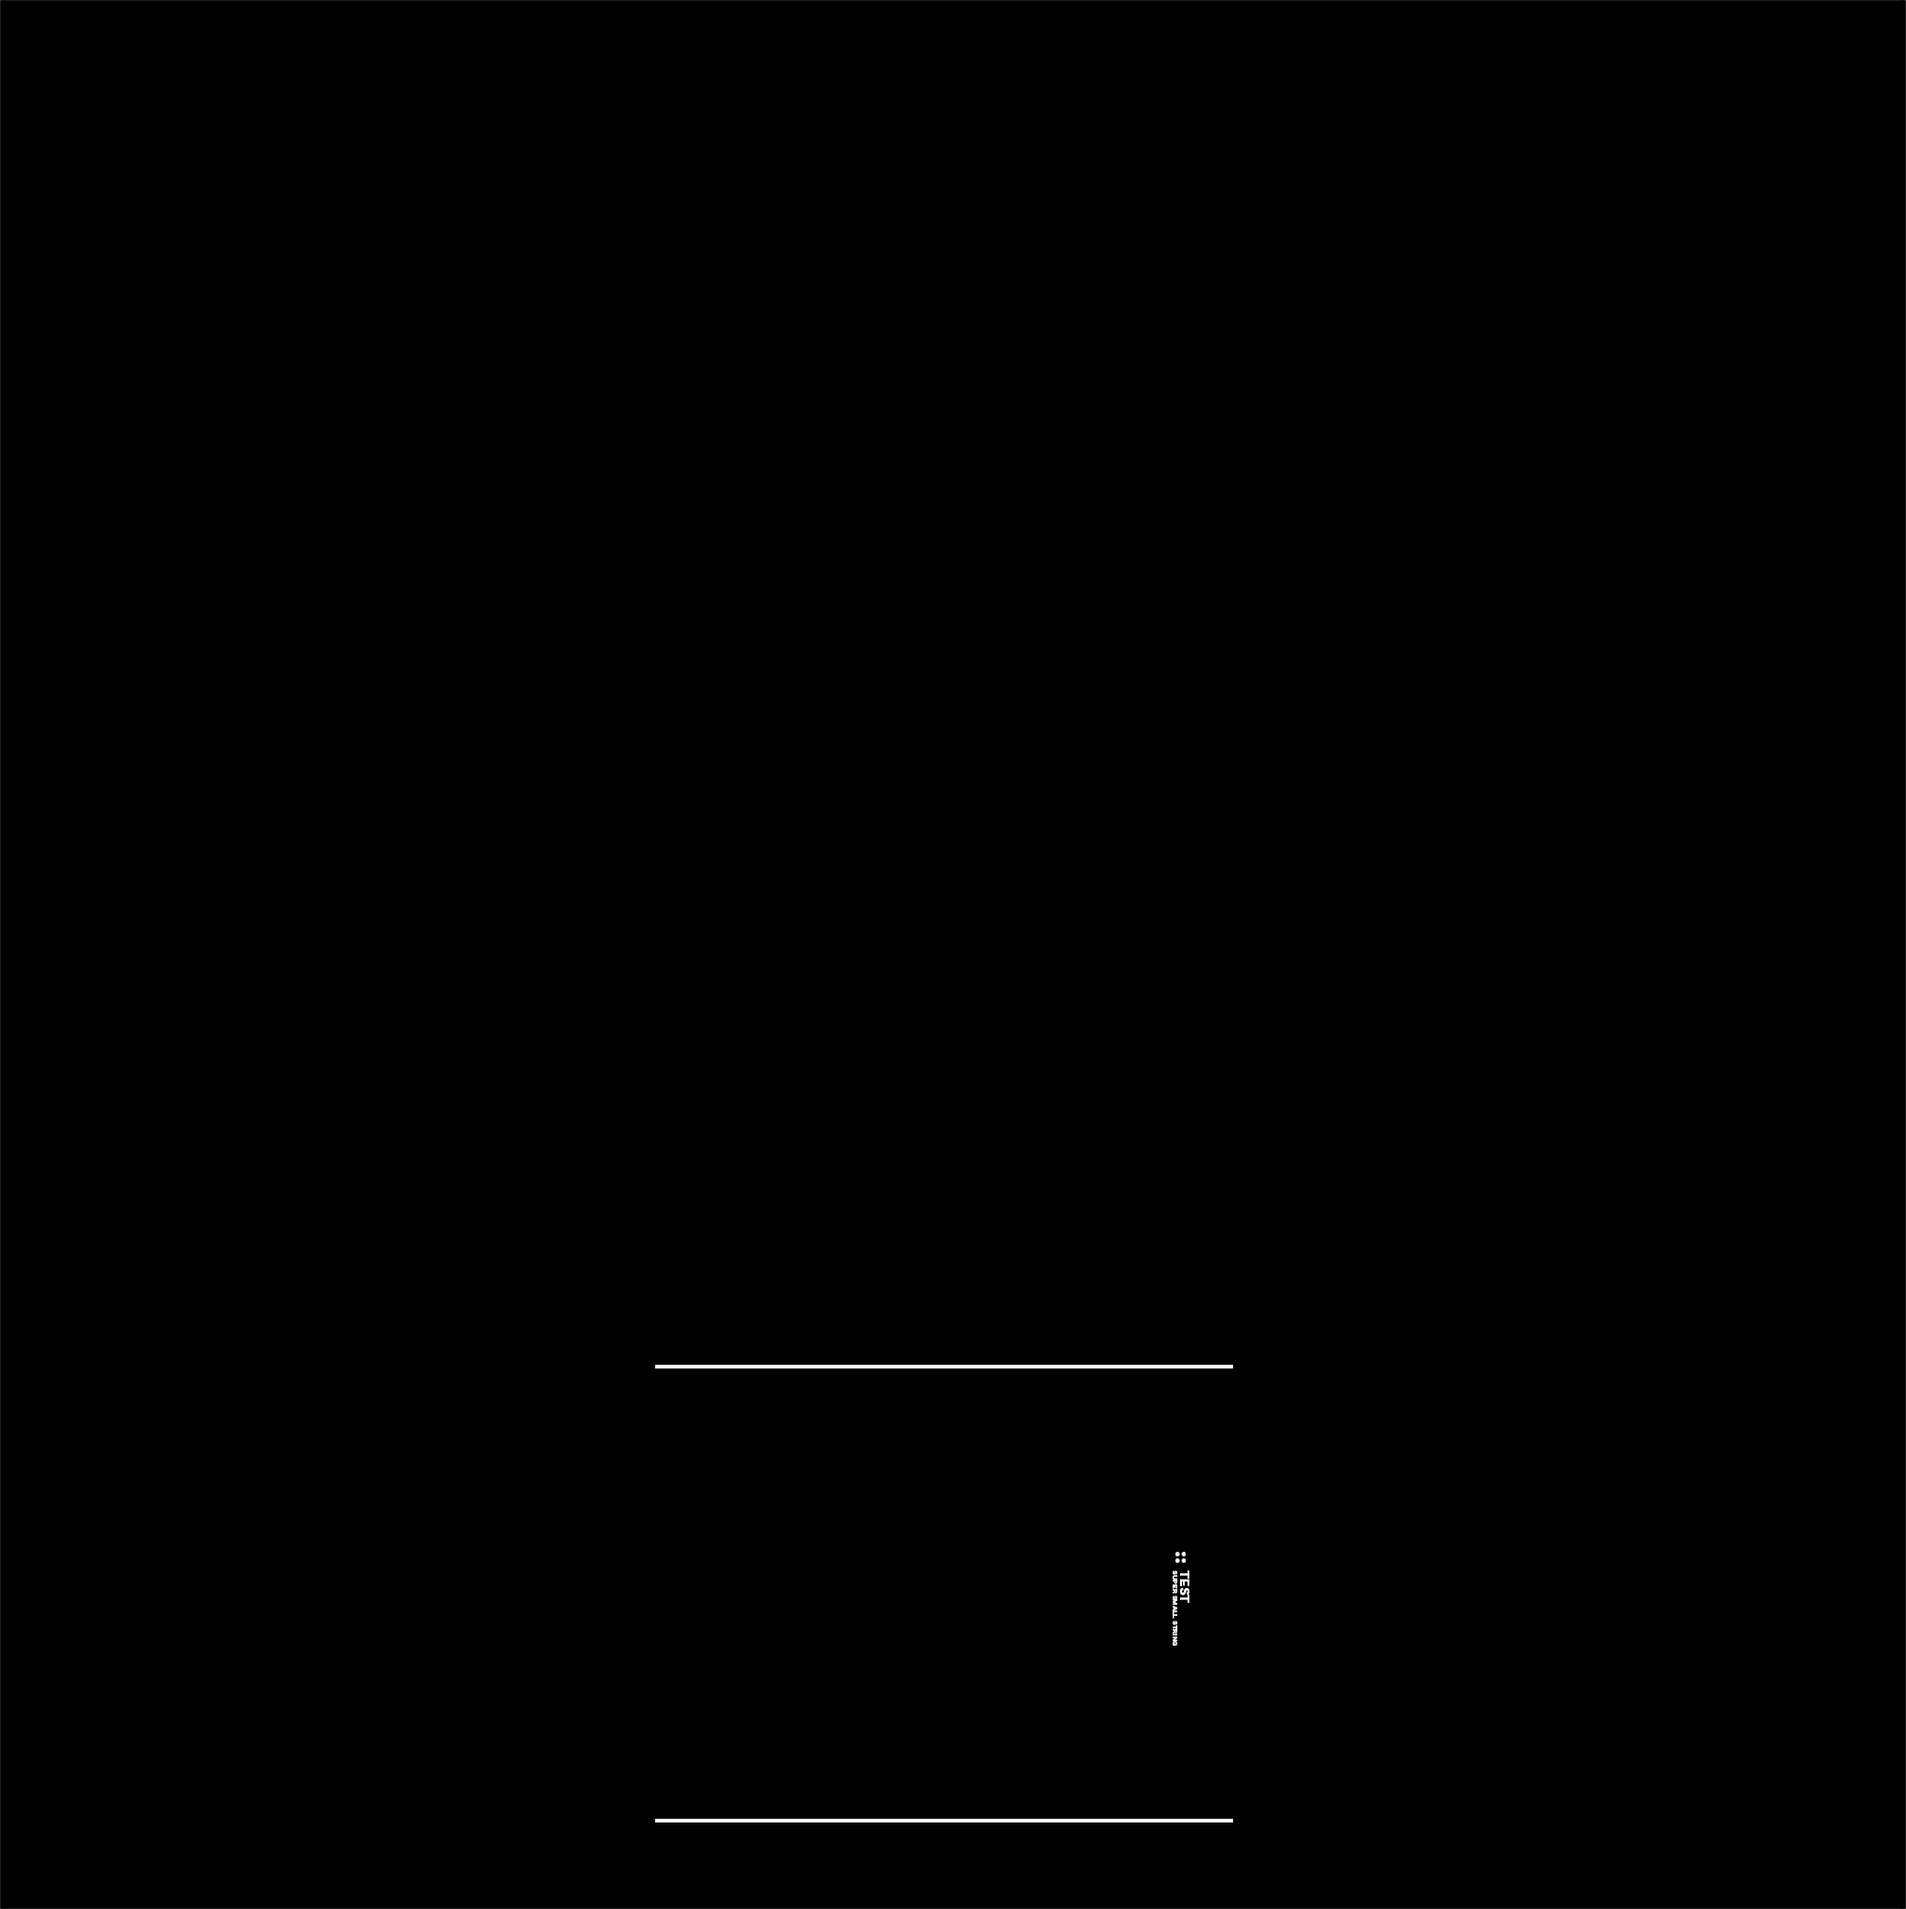
<style>
.page{position:relative;width:1906px;height:1909px;background:#000000}
.page>*{position:absolute;margin:0}
.t1{font:5.7px "HiraKakuStdN-W8";color:#ffffff}
.t2{font:10.4px "HiraKakuStdN-W8";color:#ffffff}
</style>
<div class="page">
<p class="t1" style="left:1172px;top:1571px;width:5px;height:75px;rotate:90deg">SUPER SMALL STRING</p>
<p class="t2" style="left:1180px;top:1571px;width:9px;height:32px;rotate:90deg">TEST</p>
</div>
